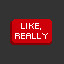
<style>
.page{position:relative;width:64px;height:64px;background:#333333}
.page>*{position:absolute;margin:0}
.t1{font:13px/10.8px "MunroSmall";color:#ffffff}
</style>
<div class="page">
<p class="t1" style="left:15px;top:23px;width:33px;height:16px;text-align:center">Like,<br>Really</p>
</div>
